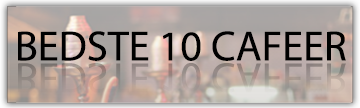
<style>
.page{position:relative;width:360px;height:108px}
.page>*{position:absolute;margin:0}
.t1{font:42.4px "MyriadPro-Regular";color:#000000}
.t2{font:42.4px "MyriadPro-Regular"}
</style>
<div class="page">
<p class="t1" style="left:18px;top:31px;width:328px;height:30px">BEDSTE 10 CAFEER</p>
<p class="t2" style="left:18px;top:63px;width:328px;height:30px">BEDSTE 10 CAFEER</p>
</div>
